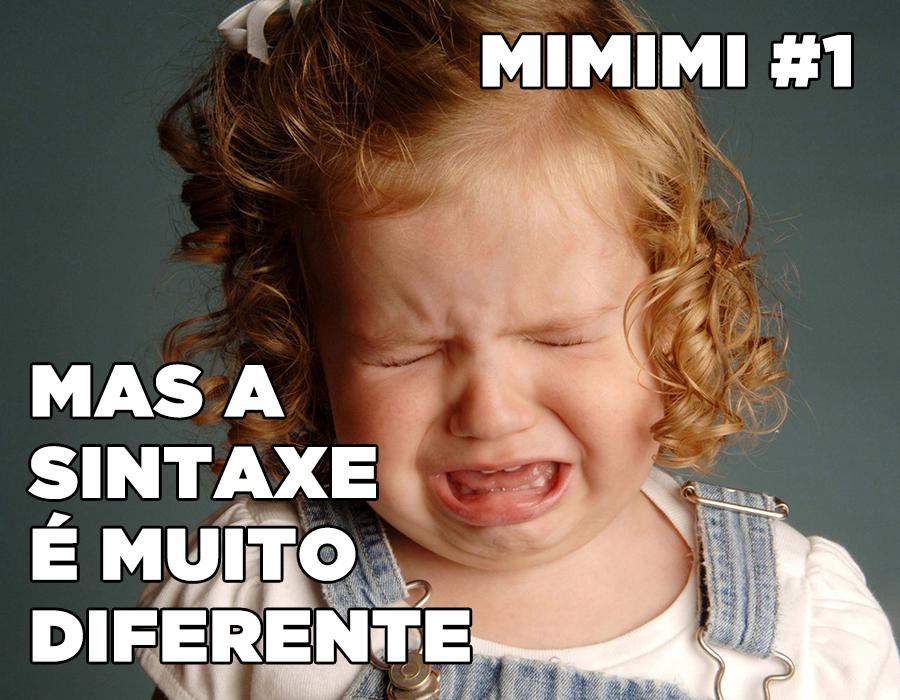
<style>
.page{position:relative;width:900px;height:700px}
.page>*{position:absolute;margin:0}
.t1{font:71.9px "GothamUltra";color:#ffffff;font-weight:bold}
.t2{font:71.9px/81.7px "GothamUltra";color:#ffffff;font-weight:bold}
</style>
<div class="page">
<p class="t1" style="left:482px;top:35px;width:369px;height:52px">MIMIMI #1</p>
<p class="t2" style="left:28px;top:364px;width:442px;height:298px">MAS A<br>SINTAXE<br>É MUITO<br>DIFERENTE</p>
</div>
